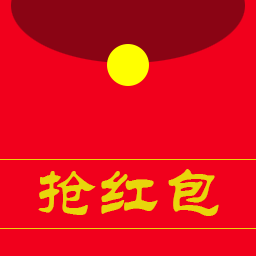
<style>
.page{position:relative;width:256px;height:256px;background:#f1001c}
.page>*{position:absolute;margin:0}
.t1{font:63px "STLiti";color:#e8d60b}
</style>
<div class="page">
<p class="t1" style="left:38px;top:169px;width:181px;height:47px">抢红包</p>
</div>
